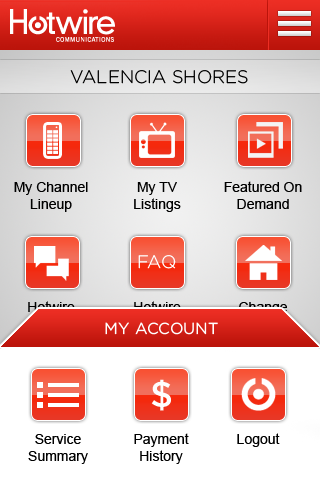
<style>
.page{position:relative;width:320px;height:480px;background:#ffffff}
.page>*{position:absolute;margin:0}
.t1{font:18px "Gotham-Light";color:#000000;text-transform:uppercase}
.t2{font:14px "ArialMT";color:#000000}
.t3{font:18px "Gotham-Light";color:#ffffff}
.t4{font:14px "ArialMT"}
.t5{font:14px "ArialMT";color:#da251b}
.t6{font:16px "Gotham-Book";color:#ffffff;text-transform:uppercase}
.t7{font:36px "Gotham-Medium";color:#fefefe}
</style>
<div class="page">
<p class="t1" style="left:70px;top:70px;width:178px;height:14px">Valencia Shores</p>
<p class="t2" style="left:14px;top:182px;width:74px;height:30px;text-align:center">My Channel Lineup</p>
<p class="t2" style="left:134px;top:182px;width:47px;height:30px;text-align:center">My TV <br>Listings</p>
<p class="t2" style="left:224px;top:181px;width:78px;height:28px;text-align:center">Featured On Demand</p>
<p class="t3" style="left:138px;top:255px;width:38px;height:14px">FAQ</p>
<p class="t4" style="left:28px;top:301px;width:47px;height:31px;text-align:center">Hotwire <br>Blog</p>
<p class="t4" style="left:133px;top:301px;width:49px;height:31px;text-align:center">Hotwire <br>Support</p>
<p class="t5" style="left:237px;top:302px;width:53px;height:30px;text-align:center">Change <br>Property</p>
<p class="t6" style="left:105px;top:322px;width:113px;height:13px">My Account</p>
<p class="t7" style="left:151px;top:379px;width:20px;height:32px">$</p>
<p class="t2" style="left:28px;top:434px;width:60px;height:30px;text-align:center">Service <br>Summary</p>
<p class="t2" style="left:134px;top:433px;width:55px;height:31px;text-align:center">Payment <br>History</p>
<p class="t2" style="left:237px;top:433px;width:43px;height:14px">Logout</p>
</div>
